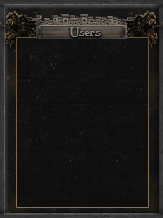
<style>
.page{position:relative;width:163px;height:218px}
.page>*{position:absolute;margin:0}
.t1{font:12.7px "Folkard";color:#88837e}
</style>
<div class="page">
<p class="t1" style="left:70px;top:27px;width:31px;height:10px">Users</p>
</div>
